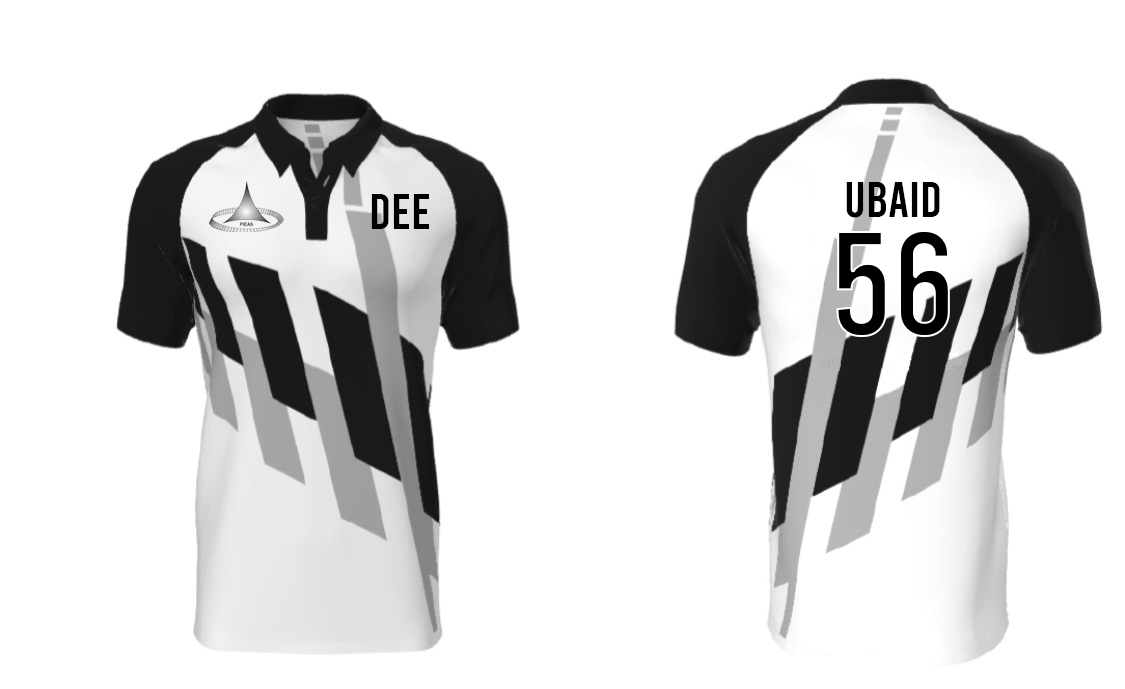
<style>
.page{position:relative;width:1125px;height:689px;background:#ffffff}
.page>*{position:absolute;margin:0}
.t1{font:50px "Bebas-Regular";color:#000000}
.t2{font:150px "Bebas-Regular";color:#000000}
</style>
<div class="page">
<p class="t1" style="left:846px;top:182px;width:94px;height:36px">UBAID</p>
<p class="t1" style="left:371px;top:194px;width:58px;height:35px">DEE</p>
<p class="t2" style="left:836px;top:230px;width:114px;height:107px">56</p>
</div>
